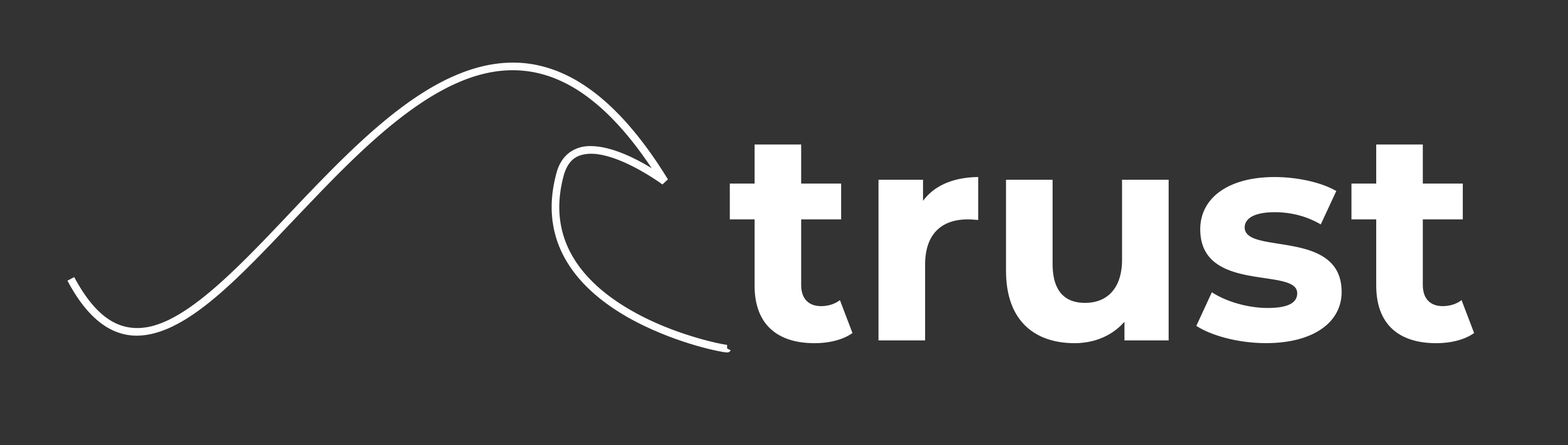
<style>
.page{position:relative;width:1568px;height:445px;background:#333333}
.page>*{position:absolute;margin:0}
.t1{font:298.3px "Montserrat-Bold";color:#ffffff}
</style>
<div class="page">
<p class="t1" style="left:730px;top:144px;width:744px;height:200px">trust</p>
</div>
